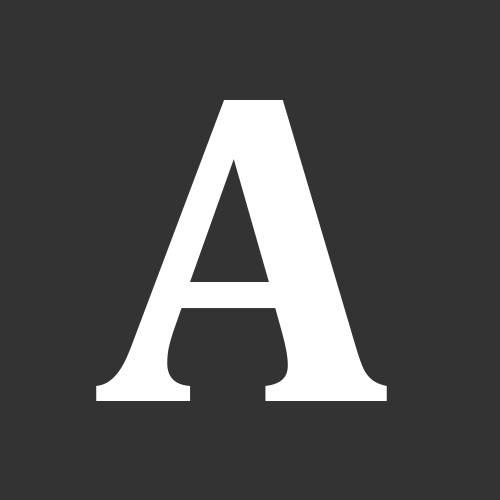
<style>
.page{position:relative;width:500px;height:500px;background:#333333}
.page>*{position:absolute;margin:0}
.t1{font:450px "Cambria-Bold";color:#ffffff}
</style>
<div class="page">
<p class="t1" style="left:96px;top:100px;width:291px;height:301px">A</p>
</div>
